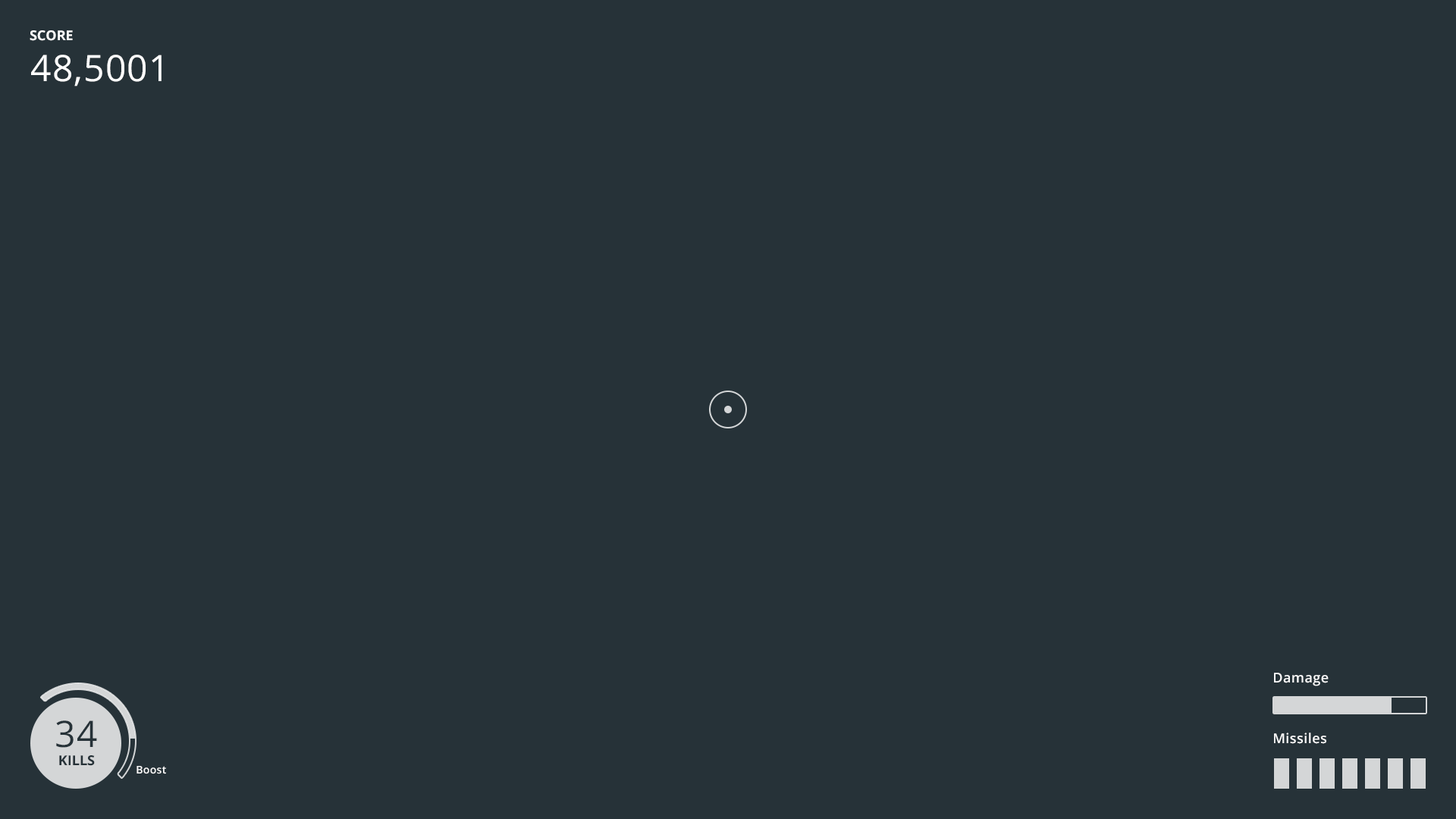
<style>
.page{position:relative;width:1456px;height:819px;background:#263238}
.page>*{position:absolute;margin:0}
.t1{font:13.6px "OpenSans-Bold";color:#ffffff}
.t2{font:36.4px "OpenSans";letter-spacing:0.025em;color:#ffffff}
.t3{font:13.7px "OpenSans-Semibold";letter-spacing:0.025em;color:#fafafa}
.t4{font:36.4px "OpenSans";letter-spacing:0.025em;color:#263238}
.t5{font:13.6px "OpenSans-Bold";color:#263238}
.t6{font:10.6px "OpenSans-Semibold";letter-spacing:0.025em;color:#fafafa}
</style>
<div class="page">
<p class="t1" style="left:30px;top:30px;width:43px;height:11px">SCORE</p>
<p class="t2" style="left:31px;top:55px;width:131px;height:31px">48,5001</p>
<p class="t3" style="left:1274px;top:673px;width:55px;height:13px">Damage</p>
<p class="t4" style="left:56px;top:720px;width:41px;height:28px">34</p>
<p class="t3" style="left:1274px;top:733px;width:52px;height:11px">Missiles</p>
<p class="t5" style="left:59px;top:755px;width:36px;height:11px">KILLS</p>
<p class="t6" style="left:136px;top:766px;width:30px;height:8px">Boost</p>
</div>
